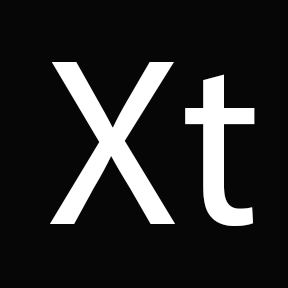
<style>
.page{position:relative;width:288px;height:288px;background:#060606}
.page>*{position:absolute;margin:0}
.t1{font:240px "MyriadPro-Regular";color:#ffffff}
</style>
<div class="page">
<p class="t1" style="left:50px;top:62px;width:205px;height:164px">Xt</p>
</div>
